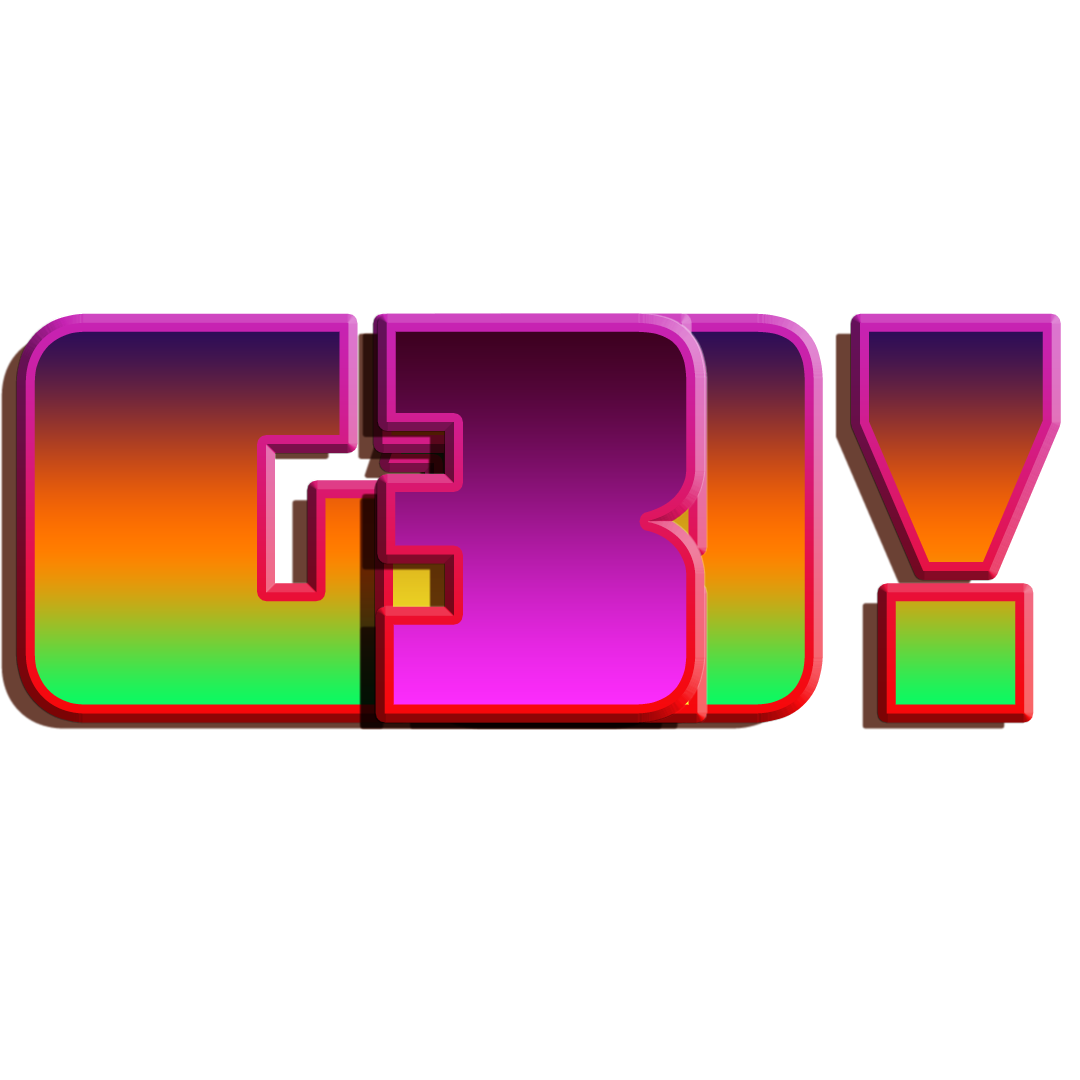
<style>
.page{position:relative;width:1080px;height:1080px;background:#ffffff}
.page>*{position:absolute;margin:0}
.t1{font:488px "Chuck";letter-spacing:0.04em}
.t2{font:488px "Chuck"}
</style>
<div class="page">
<p class="t1" style="left:25px;top:322px;width:1027px;height:392px">GO!</p>
<p class="t2" style="left:384px;top:322px;width:312px;height:392px">3</p>
</div>
